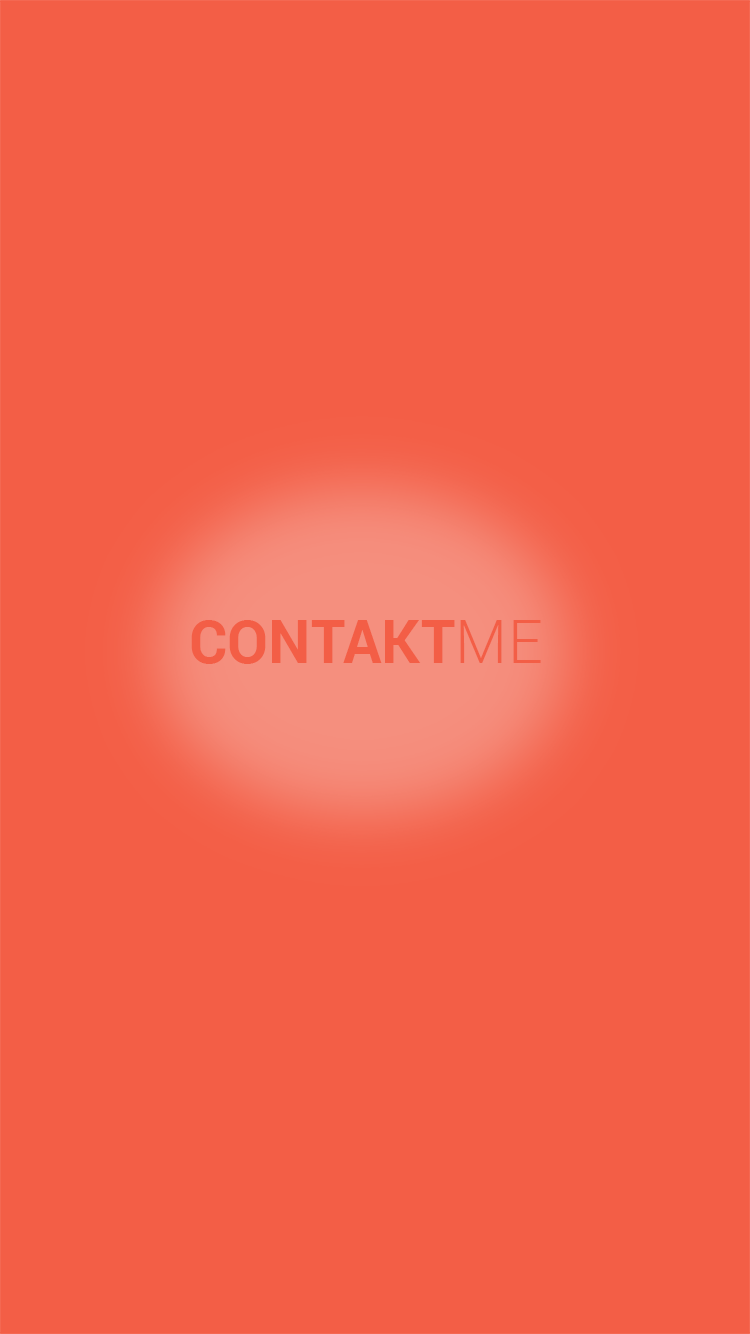
<style>
.page{position:relative;width:750px;height:1334px;background:#f35e46}
.page>*{position:absolute;margin:0}
.t1{font:60.4px "Roboto-Bold";color:#f35e46}
.t2{font:60.4px "Roboto-Light";color:#f35e46}
</style>
<div class="page">
<p class="t1" style="left:191px;top:620px;width:350px;height:44px">CONTAKT<span class="t2">ME</span></p>
</div>
